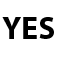
<style>
.page{position:relative;width:57px;height:57px;background:#ffffff}
.page>*{position:absolute;margin:0}
.t1{font:32px "MyriadPro-Bold";color:#000000}
</style>
<div class="page">
<p class="t1" style="left:2px;top:17px;width:52px;height:22px">YES</p>
</div>
